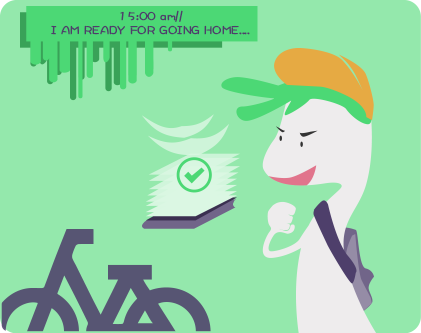
<style>
.page{position:relative;width:421px;height:333px;background:#94e8ac}
.page>*{position:absolute;margin:0}
.t1{font:12px "DFWaWaSC-W5";color:#4e3f6b;font-weight:bold}
</style>
<div class="page">
<p class="t1" style="left:51px;top:10px;width:199px;height:25px;text-align:center">15:00 am//<br>I AM READY FOR GOING HOME....</p>
</div>
